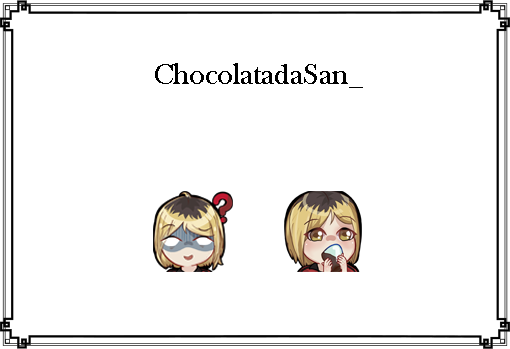
<style>
.page{position:relative;width:510px;height:349px;background:#ffffff}
.page>*{position:absolute;margin:0}
.t1{font:30px "BaskOldFace";color:#000000}
</style>
<div class="page">
<p class="t1" style="left:155px;top:63px;width:208px;height:25px">ChocolatadaSan_</p>
</div>
